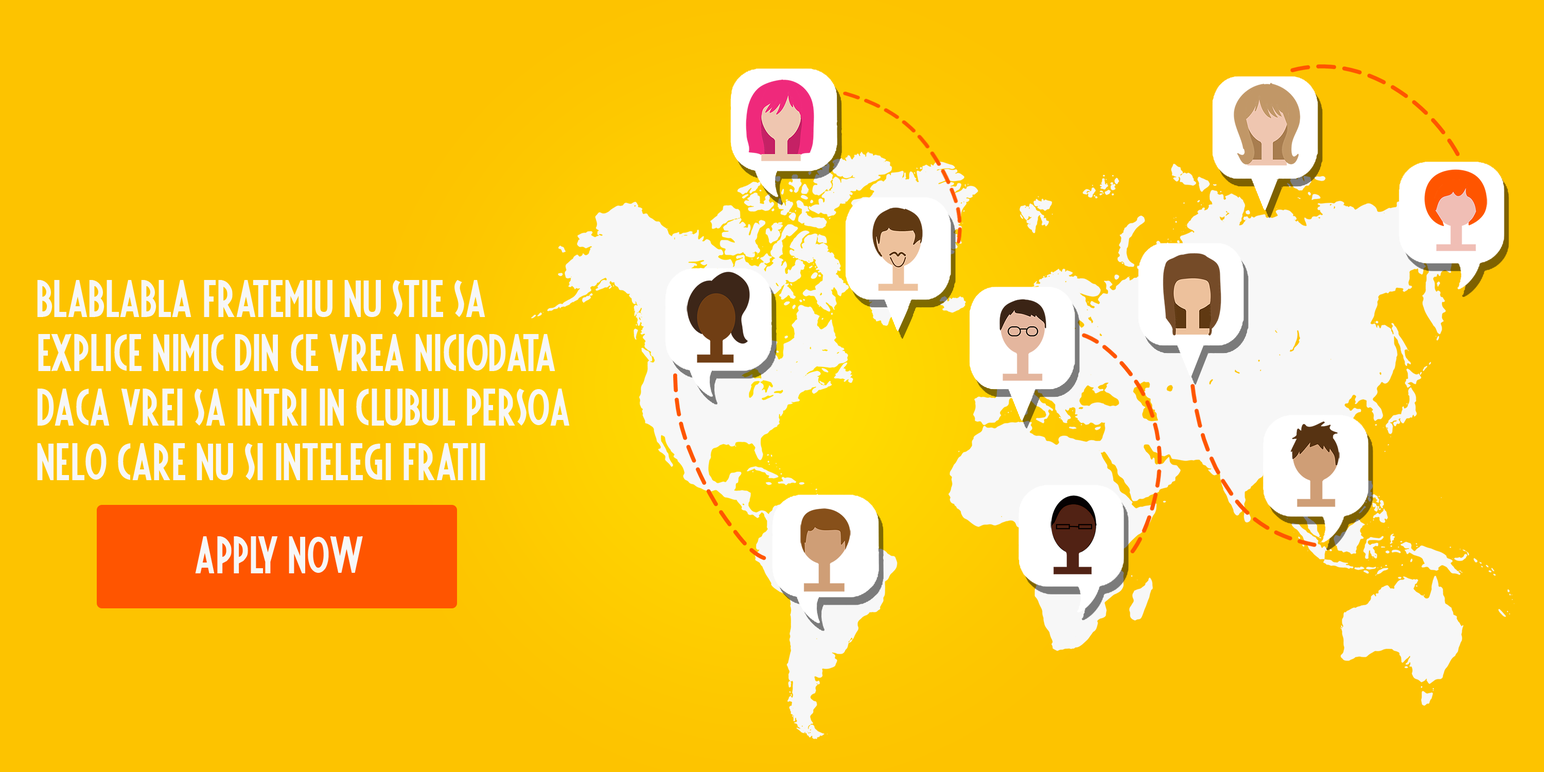
<style>
.page{position:relative;width:1544px;height:772px;background:#fdc300}
.page>*{position:absolute;margin:0}
.t1{font:41.2px/54.4px "Fiesta";color:#f7f7f7}
.t2{font:41.2px "Fiesta";color:#f7f7f7}
</style>
<div class="page">
<p class="t1" style="left:37px;top:280px;width:533px;height:200px">blablabla fratemiu nu stie sa<br>explice nimic din ce vrea niciodata<br>daca vrei sa intri in clubul persoa-<br>nelo care nu-si intelegi fratii:</p>
<p class="t2" style="left:195px;top:536px;width:168px;height:37px">apply now</p>
</div>
